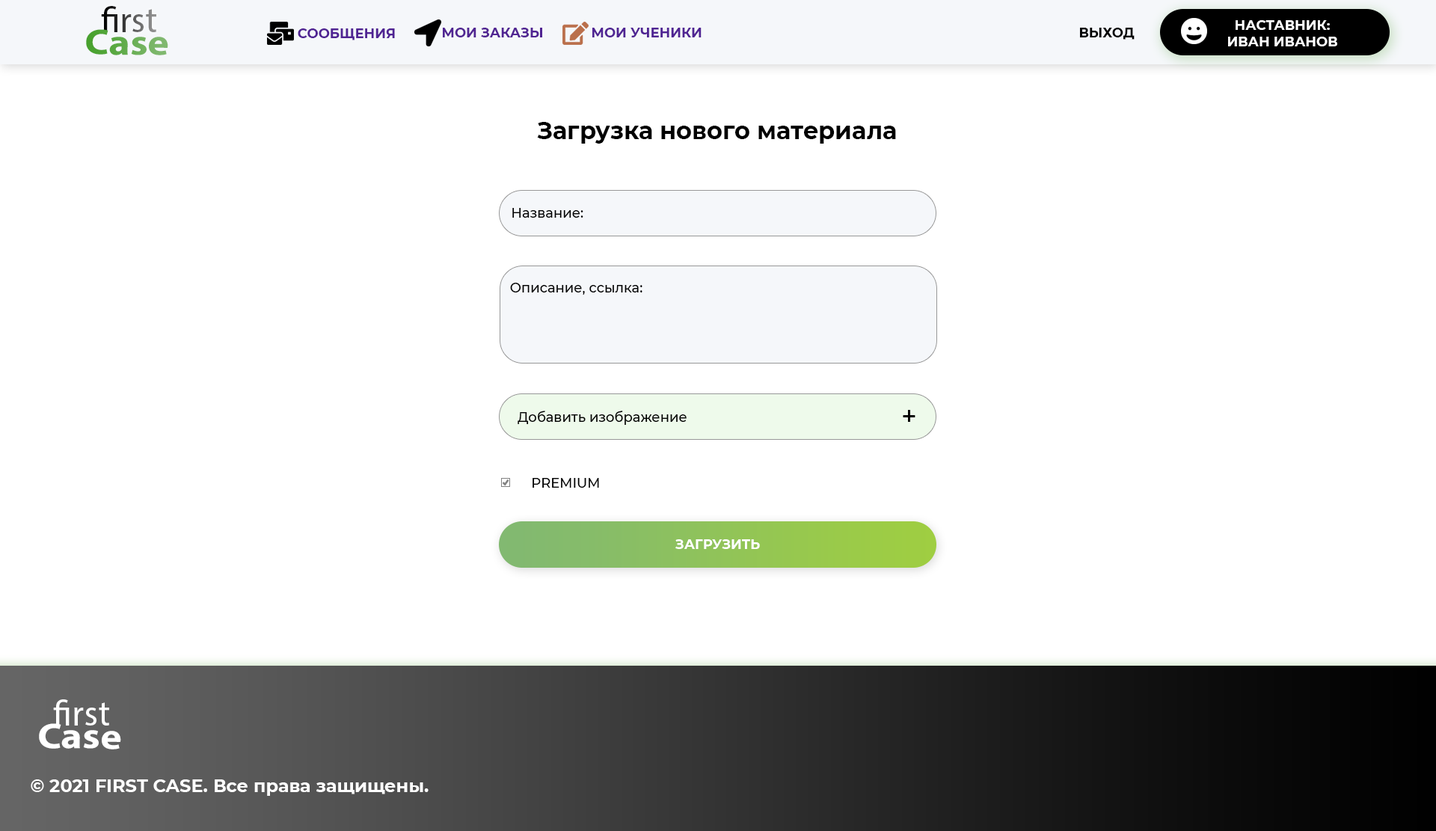
<style>
.page{position:relative;width:1436px;height:831px;background:#ffffff}
.page>*{position:absolute;margin:0}
.t1{font:35.9px "MyriadPro-Regular"}
.t2{font:35.9px "MyriadPro-Bold";scale:1.13 1}
.t3{font:35.9px "MyriadPro-Regular";scale:1.13 1}
.t4{font:13.5px "Montserrat-Bold";color:#4f2492;text-transform:uppercase}
.t5{font:13.5px "Montserrat-Bold";color:#502492;text-transform:uppercase}
.t6{font:13.5px "Montserrat-Bold";color:#000000;text-transform:uppercase}
.t7{font:13.5px "Montserrat-Bold";color:#ffffff;text-transform:uppercase}
.t8{font:23.9px "Montserrat-Bold";color:#000000}
.t9{font:13.5px "Montserrat-Medium";color:#000000}
.t10{font:26.9px "Montserrat-Medium";color:#000000}
.t11{font:35.9px "MyriadPro-Regular";color:#ffffff}
.t12{font:35.9px "MyriadPro-Bold";color:#ffffff;scale:1.13 1}
.t13{font:35.9px "MyriadPro-Regular";color:#ffffff;scale:1.13 1}
.t14{font:17.9px "Montserrat-Bold";color:#ffffff}
</style>
<div class="page">
<p class="t1" style="left:101px;top:6px;width:55px;height:26px">first</p>
<p class="t2" style="left:86px;top:29px;width:82px;height:26px;rotate:1deg"><span class="t3">       </span>Case</p>
<p class="t4" style="left:298px;top:28px;width:97px;height:12px">СООБЩЕНИЯ</p>
<p class="t5" style="left:443px;top:28px;width:99px;height:9px">МОИ ЗАКАЗЫ</p>
<p class="t4" style="left:592px;top:28px;width:109px;height:9px">мои ученики</p>
<p class="t6" style="left:1080px;top:28px;width:54px;height:12px">ВЫХОД</p>
<p class="t7" style="left:1228px;top:20px;width:109px;height:26px;text-align:center">наставник:<br>иВАН иВАНОВ</p>
<p class="t8" style="left:537px;top:122px;width:359px;height:22px">Загрузка нового материала</p>
<p class="t9" style="left:512px;top:208px;width:71px;height:10px">Название:</p>
<p class="t9" style="left:510px;top:283px;width:132px;height:12px">Описание, ссылка:</p>
<p class="t9" style="left:517px;top:410px;width:169px;height:15px">Добавить изображение</p>
<p class="t10" style="left:902px;top:410px;width:13px;height:12px">+</p>
<p class="t9" style="left:532px;top:478px;width:67px;height:9px">PREMIUM</p>
<p class="t7" style="left:675px;top:539px;width:85px;height:10px">загрузить</p>
<p class="t11" style="left:53px;top:699px;width:56px;height:26px">first</p>
<p class="t12" style="left:39px;top:723px;width:82px;height:26px;rotate:1deg"><span class="t13">       </span>Case</p>
<p class="t14" style="left:31px;top:779px;width:397px;height:17px">© 2021 FIRST CASE. Все права защищены.</p>
</div>
